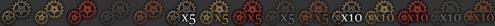
<style>
.page{position:relative;width:495px;height:26px;background:#333333}
.page>*{position:absolute;margin:0}
.t1{font:16px "SitkaBanner";letter-spacing:0.025em;color:#d5d5d5}
.t2{font:16px "SitkaBanner";letter-spacing:0.025em;color:#856f47}
.t3{font:16px "SitkaBanner";letter-spacing:0.025em;color:#9e3636}
.t4{font:16px "SitkaBanner";letter-spacing:0.025em;color:#5e5e5e}
.t5{font:16px "SitkaBanner";letter-spacing:0.025em;color:#6e4633}
.t6{font:16px "SitkaBanner";letter-spacing:0.025em;color:#dedede}
.t7{font:16px "SitkaBanner";letter-spacing:0.025em;color:#8b7349}
.t8{font:16px "SitkaBanner";letter-spacing:0.025em;color:#a53939}
.t9{font:16px "SitkaBanner";letter-spacing:0.025em;color:#616161}
.t10{font:16px "SitkaBanner";letter-spacing:0.025em;color:#724935}
</style>
<div class="page">
<p class="t1" style="left:181px;top:14px;width:15px;height:11px">x5</p>
<p class="t2" style="left:214px;top:14px;width:15px;height:11px">x5</p>
<p class="t3" style="left:247px;top:14px;width:15px;height:11px">x5</p>
<p class="t4" style="left:280px;top:14px;width:15px;height:11px">x5</p>
<p class="t5" style="left:314px;top:14px;width:15px;height:11px">x5</p>
<p class="t6" style="left:340px;top:14px;width:22px;height:8px">x10</p>
<p class="t7" style="left:372px;top:14px;width:22px;height:8px">x10</p>
<p class="t8" style="left:406px;top:14px;width:22px;height:8px">x10</p>
<p class="t9" style="left:439px;top:14px;width:22px;height:8px">x10</p>
<p class="t10" style="left:472px;top:14px;width:22px;height:8px">x10</p>
</div>
